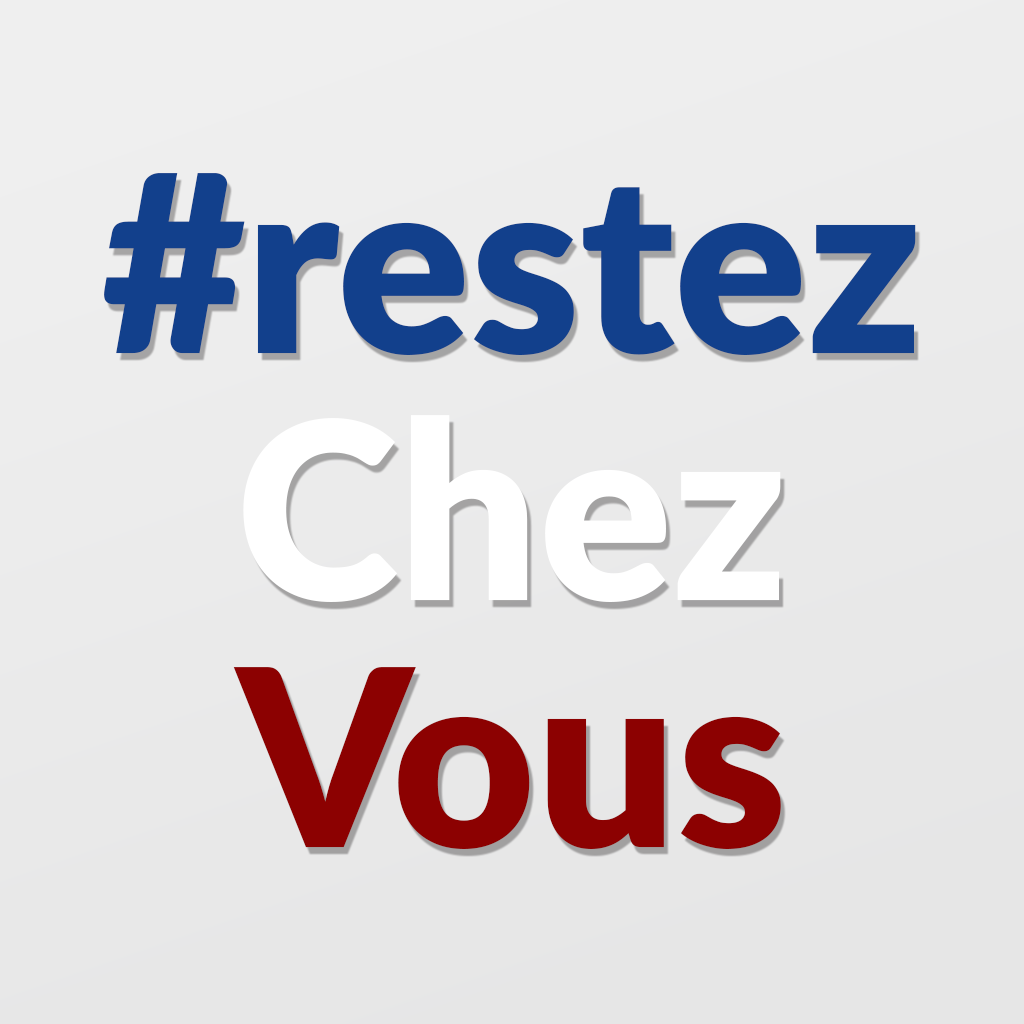
<style>
.page{position:relative;width:1024px;height:1024px}
.page>*{position:absolute;margin:0}
.t1{font:247.1px/247.1px "Lato-Black";color:#12408c}
.t2{font:247.1px/247.1px "Lato-Black";color:#ffffff}
.t3{font:247.1px/247.1px "Lato-Black";color:#8c0101}
</style>
<div class="page">
<p class="t1" style="left:104px;top:173px;width:812px;height:676px;text-align:center">#restez<br><span class="t2">Chez<br></span><span class="t3">Vous</span></p>
</div>
